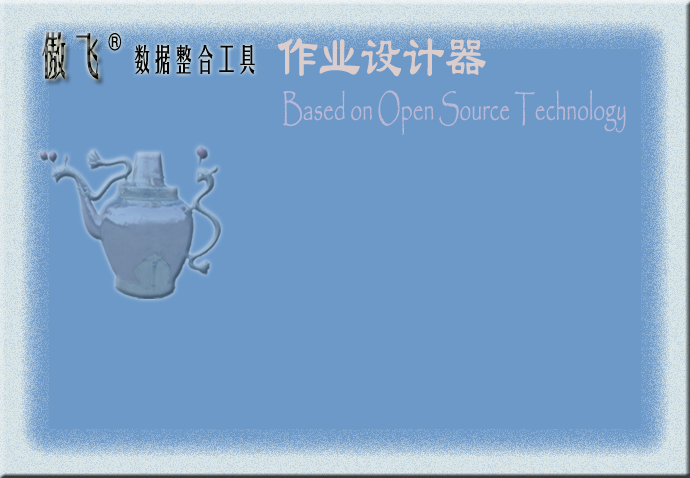
<style>
.page{position:relative;width:690px;height:478px;background:#6d99c9}
.page>*{position:absolute;margin:0}
.t1{font:48px "FZYTK--GBK1-0";scale:0.7 1}
.t2{font:18px "FZYTK--GBK1-0";color:#040404;scale:0.7 1}
.t3{font:60px "LiSu";color:#dccdcd;scale:0.7 1}
.t4{font:30px "FZYTK--GBK1-0";color:#040404;scale:0.7 1}
.t5{font:36px "Papyrus-Regular";color:#b8b8d6;scale:0.59 1}
</style>
<div class="page">
<p class="t1" style="left:42px;top:32px;width:57px;height:48px">傲飞</p>
<p class="t2" style="left:108px;top:33px;width:14px;height:18px">®</p>
<p class="t3" style="left:277px;top:38px;width:209px;height:39px">作业设计器</p>
<p class="t4" style="left:134px;top:44px;width:121px;height:30px">数据整合工具</p>
<p class="t5" style="left:283px;top:90px;width:343px;height:45px">Based on Open Source Technology</p>
</div>
